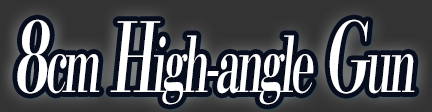
<style>
.page{position:relative;width:432px;height:112px;background:#070d1d}
.page>*{position:absolute;margin:0}
.t1{font:76.8px "KochoStd-Heavy";letter-spacing:-0.08em;color:#ffffff;font-style:italic;scale:0.57 1}
.t2{font:96px "KochoStd-Heavy";letter-spacing:-0.08em;color:#ffffff;font-style:italic;scale:0.57 1}
</style>
<div class="page">
<p class="t1" style="left:17px;top:19px;width:398px;height:86px"><span class="t2">8</span>cm<span class="t2"> H</span>igh-angle<span class="t2"> G</span>un</p>
</div>
